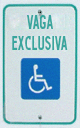
<style>
.page{position:relative;width:80px;height:128px}
.page>*{position:absolute;margin:0}
.t1{font:19.5px/21px "Journeyman-Line";color:#3aa69e;scale:0.77 1}
</style>
<div class="page">
<p class="t1" style="left:12px;top:15px;width:56px;height:35px;text-align:center">VAGA<br>EXCLUSIVA</p>
</div>
